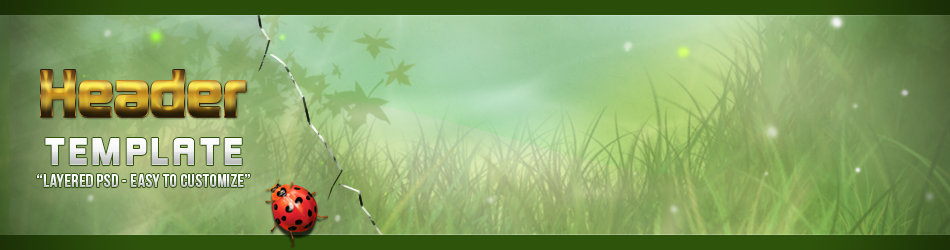
<style>
.page{position:relative;width:950px;height:250px}
.page>*{position:absolute;margin:0}
.t1{font:61.7px "KimberleyBl-Regular"}
.t2{font:35.7px "KimberleyBl-Regular";letter-spacing:0.1em}
.t3{font:18px "BebasNeue";letter-spacing:0.02em}
</style>
<div class="page">
<p class="t1" style="left:41px;top:70px;width:205px;height:47px">Header</p>
<p class="t2" style="left:45px;top:138px;width:197px;height:27px">TEMPLATE</p>
<p class="t3" style="left:37px;top:174px;width:213px;height:13px">“Layered PSD - Easy to customize”</p>
</div>
